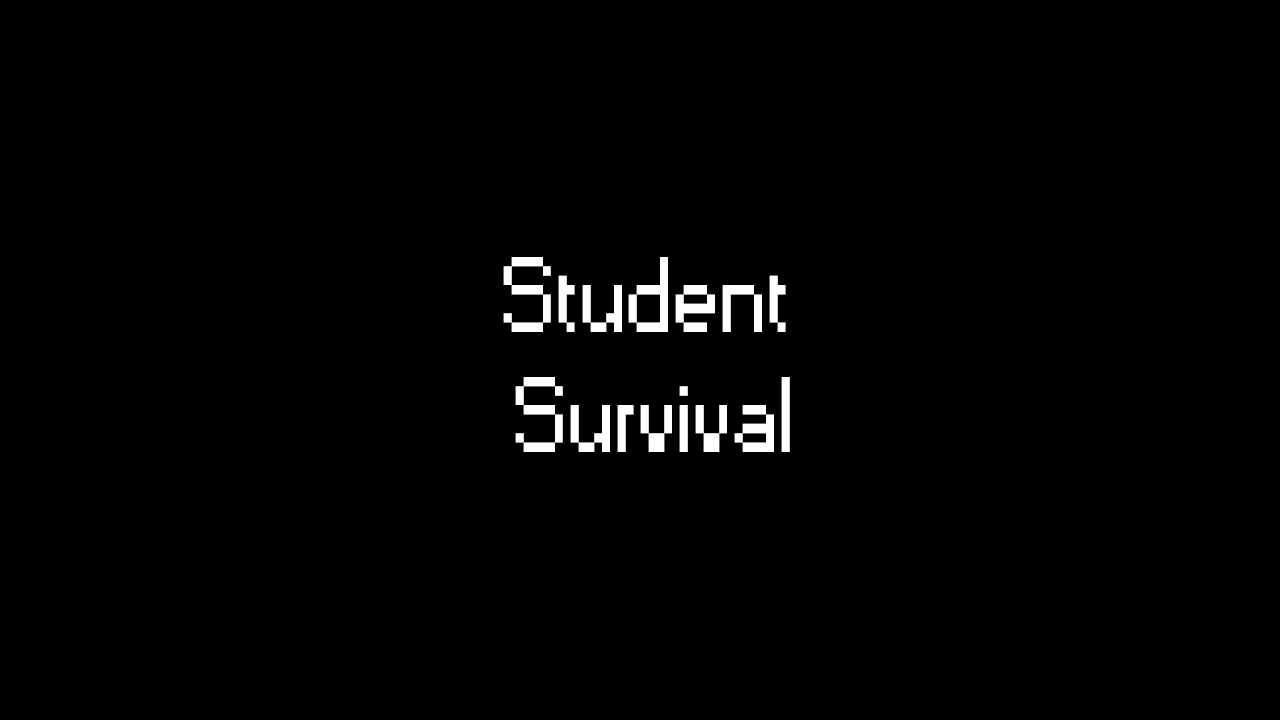
<style>
.page{position:relative;width:1280px;height:720px;background:#000000}
.page>*{position:absolute;margin:0}
.t1{font:100px "Small Fonts";color:#ffffff}
</style>
<div class="page">
<p class="t1" style="left:503px;top:257px;width:287px;height:195px;text-align:center">Student<br> Survival</p>
</div>
